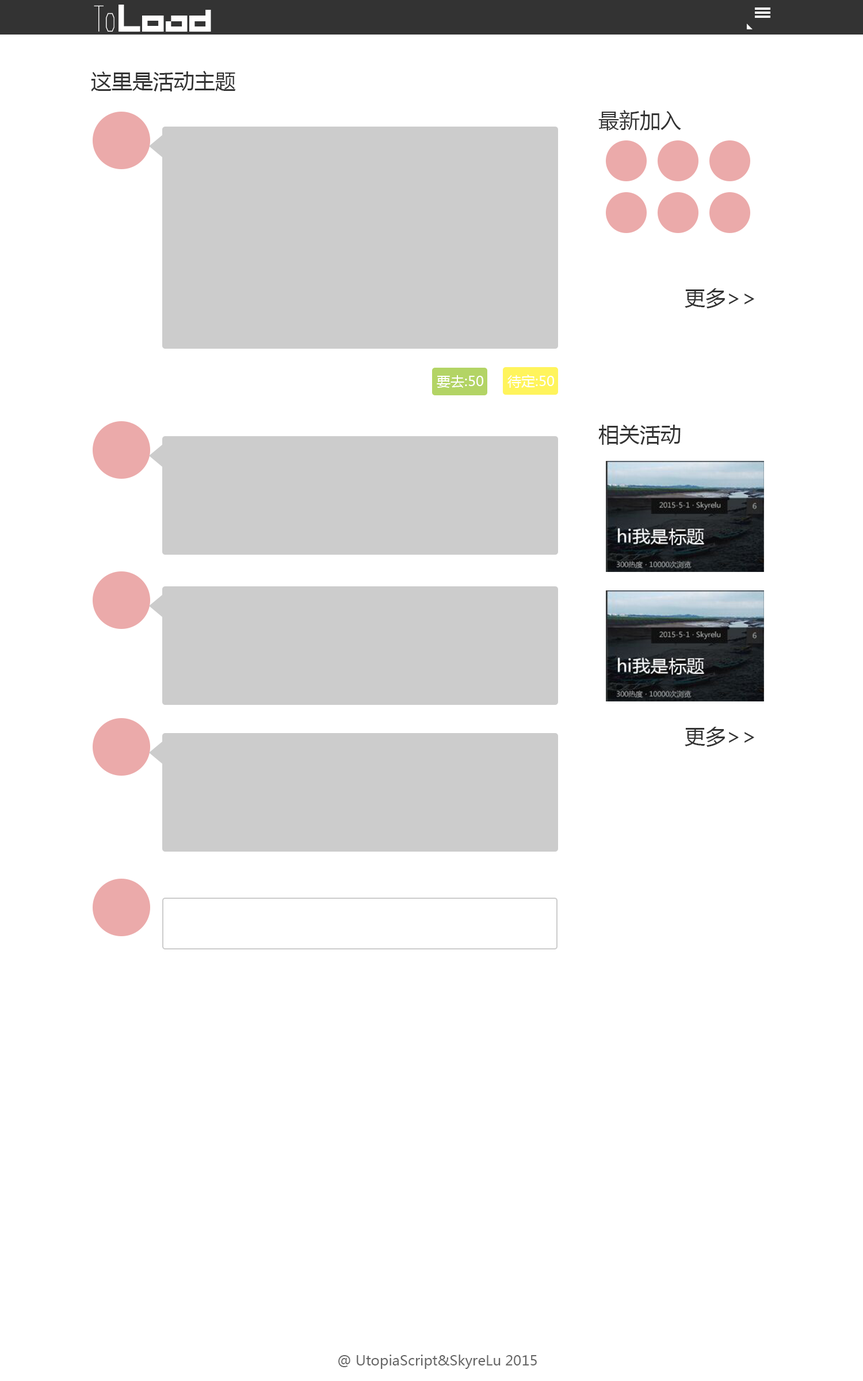
<style>
.page{position:relative;width:863px;height:1381px;background:#ffffff}
.page>*{position:absolute;margin:0}
.t1{font:20.7px "MicrosoftYaHei";color:#333333}
.t2{font:13.8px "MicrosoftYaHei";color:#ffffff}
.t3{font:13.8px "MicrosoftYaHei";color:#666666}
</style>
<div class="page">
<p class="t1" style="left:91px;top:71px;width:145px;height:21px">这里是活动主题</p>
<p class="t1" style="left:599px;top:110px;width:82px;height:21px">最新加入</p>
<p class="t1" style="left:685px;top:288px;width:70px;height:20px">更多&gt;&gt;</p>
<p class="t2" style="left:437px;top:375px;width:46px;height:13px">要去:50</p>
<p class="t2" style="left:508px;top:375px;width:46px;height:13px">待定:50</p>
<p class="t1" style="left:599px;top:425px;width:82px;height:20px">相关活动</p>
<p class="t1" style="left:685px;top:727px;width:70px;height:20px">更多&gt;&gt;</p>
<p class="t3" style="left:338px;top:1355px;width:199px;height:14px">@ UtopiaScript&amp;SkyreLu 2015</p>
</div>
